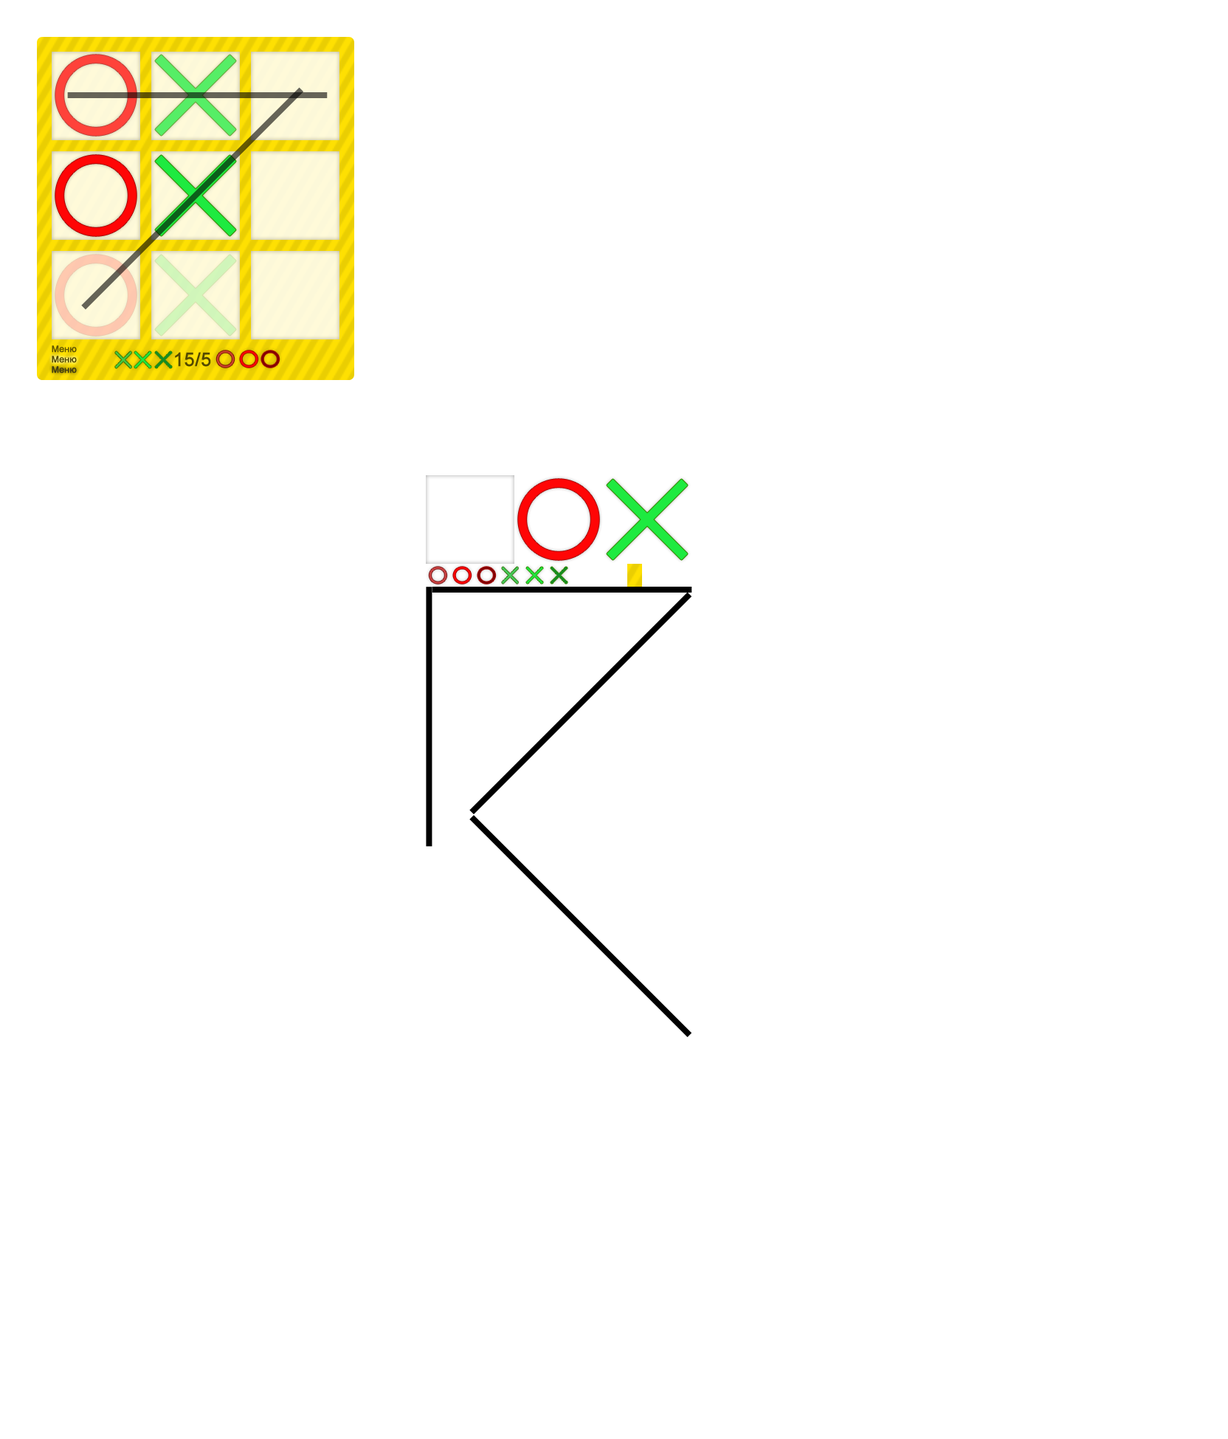
<style>
.page{position:relative;width:1228px;height:1439px;background:#ffffff}
.page>*{position:absolute;margin:0}
.t1{font:9px "ArialMT";color:#625601;font-weight:bold}
.t2{font:18.8px "ArialMT";color:#534900;font-weight:bold}
.t3{font:9px "ArialMT";color:#534900;font-weight:bold}
</style>
<div class="page">
<p class="t1" style="left:52px;top:345px;width:25px;height:8px">Меню</p>
<p class="t2" style="left:175px;top:352px;width:36px;height:15px">15/5</p>
<p class="t3" style="left:52px;top:356px;width:25px;height:7px">Меню</p>
<p class="t3" style="left:52px;top:366px;width:25px;height:7px">Меню</p>
</div>
